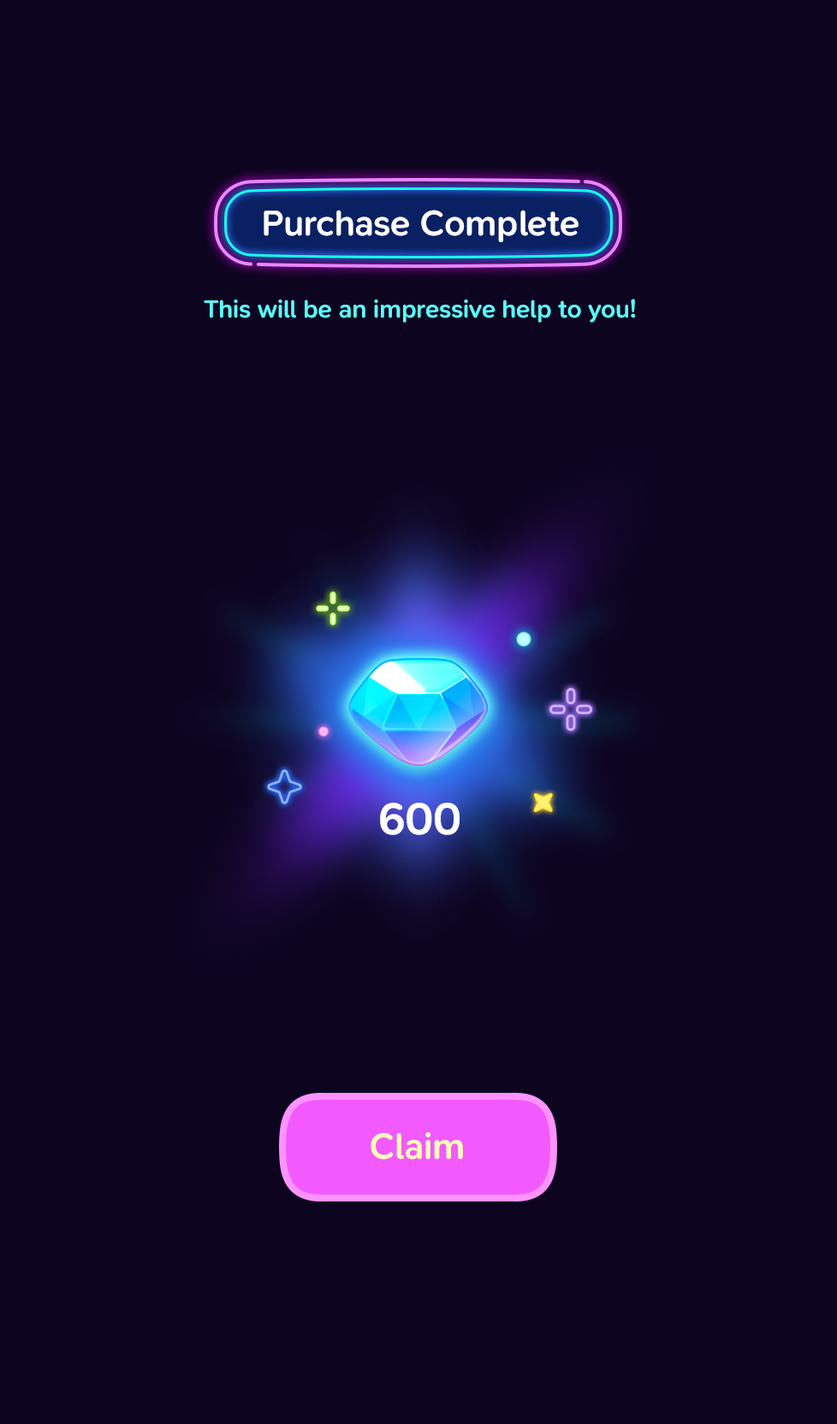
<style>
.page{position:relative;width:837px;height:1424px;background:#0d0420}
.page>*{position:absolute;margin:0}
.t1{font:36.8px "SNPro-SemiBold";letter-spacing:-0.01em;color:#ffffff}
.t2{font:25.7px "SNPro-SemiBold";letter-spacing:-0.01em;color:#5afdff}
.t3{font:46.2px "SNPro-SemiBold";letter-spacing:-0.01em;color:#ffffff}
.t4{font:37.7px "SNPro-SemiBold";letter-spacing:-0.01em;color:#fefbb7}
</style>
<div class="page">
<p class="t1" style="left:264px;top:210px;width:315px;height:32px">Purchase Complete</p>
<p class="t2" style="left:204px;top:299px;width:431px;height:24px">This will be an impressive help to you!</p>
<p class="t3" style="left:380px;top:803px;width:80px;height:32px">600</p>
<p class="t4" style="left:371px;top:1132px;width:92px;height:28px">Claim</p>
</div>
